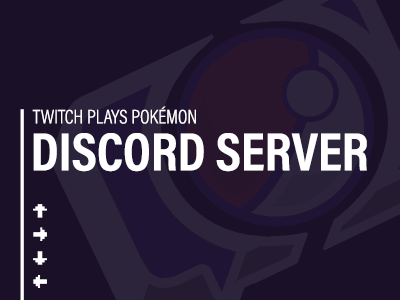
<style>
.page{position:relative;width:400px;height:300px;background:#1a1129}
.page>*{position:absolute;margin:0}
.t1{font:19.8px "AcuminProCond-Light";color:#ffffff;text-transform:uppercase}
.t2{font:54.4px "AcuminProCond-Bold";color:#ffffff;text-transform:uppercase}
</style>
<div class="page">
<p class="t1" style="left:32px;top:106px;width:164px;height:18px">Twitch Plays Pokémon</p>
<p class="t2" style="left:33px;top:133px;width:334px;height:39px">Discord Server</p>
</div>
